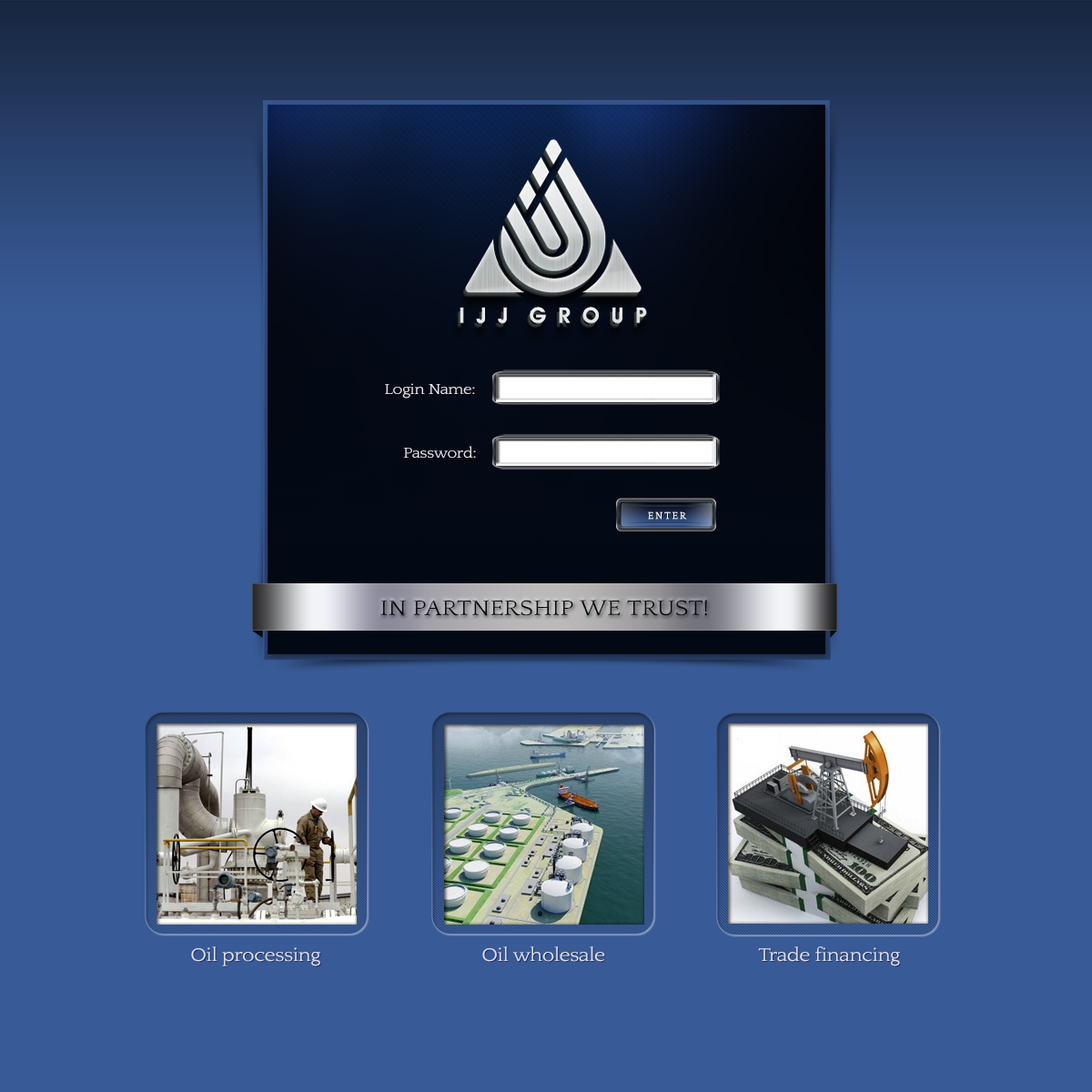
<style>
.page{position:relative;width:1092px;height:1092px;background:#385a96}
.page>*{position:absolute;margin:0}
.t1{font:15.3px "Quattrocento";letter-spacing:-0.025em;color:#e4e2ed;scale:1.11 1}
.t2{font:10px "Quattrocento";letter-spacing:0.18em;color:#fdfcfd}
.t3{font:22.4px "Quattrocento";letter-spacing:-0.005em;color:#050912;scale:1.11 1}
.t4{font:19.3px "Quattrocento";letter-spacing:-0.025em;color:#e4e2ed;scale:1.11 1}
</style>
<div class="page">
<p class="t1" style="left:385px;top:383px;width:90px;height:16px">Login Name:</p>
<p class="t1" style="left:403px;top:446px;width:73px;height:12px">Password:</p>
<p class="t2" style="left:648px;top:511px;width:39px;height:9px">ENTER</p>
<p class="t3" style="left:380px;top:600px;width:327px;height:16px">IN PARTNERSHIP WE TRUST!</p>
<p class="t4" style="left:191px;top:946px;width:129px;height:20px">Oil processing</p>
<p class="t4" style="left:482px;top:946px;width:123px;height:16px">Oil wholesale</p>
<p class="t4" style="left:758px;top:946px;width:142px;height:20px">Trade financing</p>
</div>
